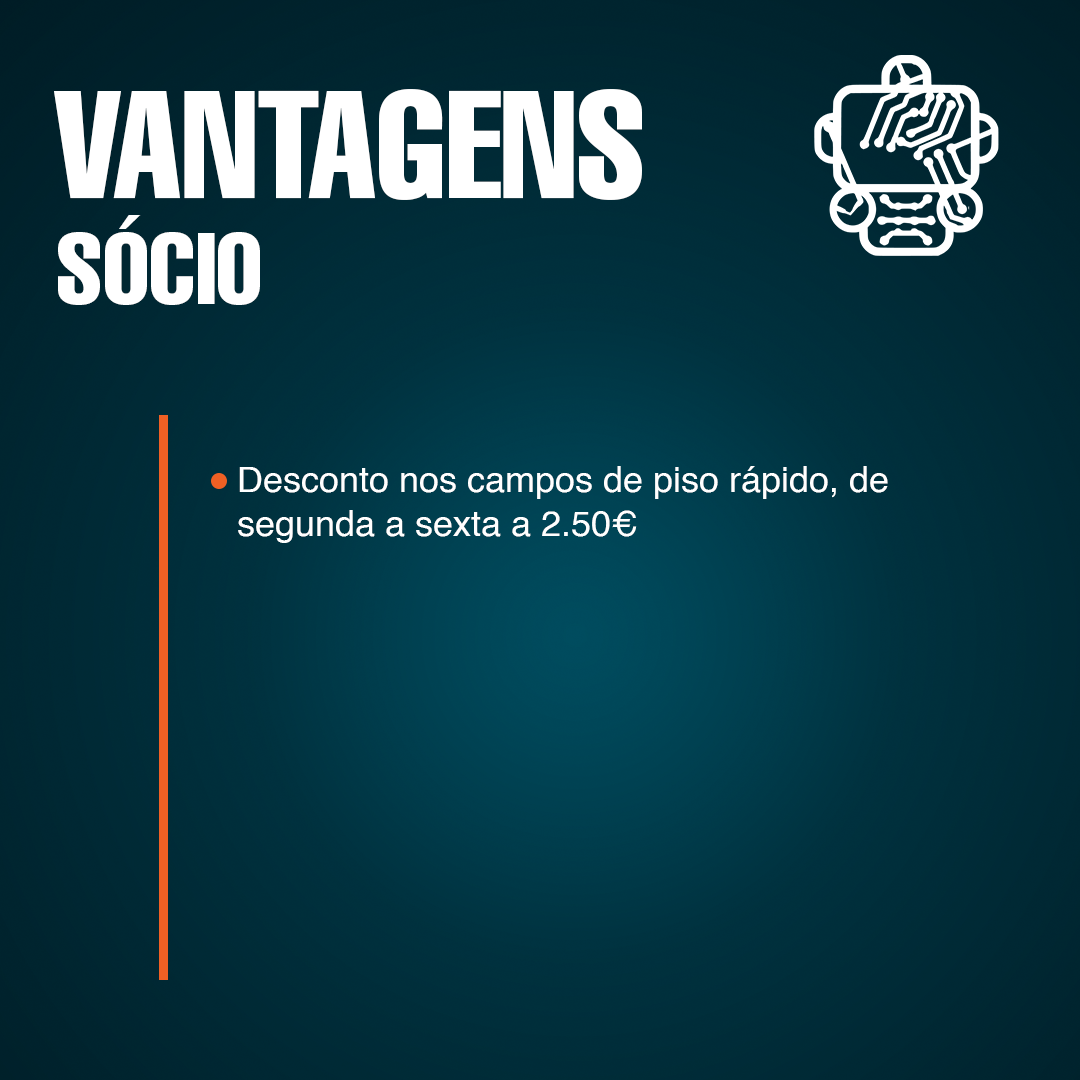
<style>
.page{position:relative;width:1080px;height:1080px}
.page>*{position:absolute;margin:0}
.t1{font:150px "Helvetica-Compressed";color:#ffffff}
.t2{font:100px "Helvetica-Compressed";color:#ffffff}
.t3{font:36px "Helvetica";color:#ffffff}
</style>
<div class="page">
<p class="t1" style="left:54px;top:89px;width:588px;height:111px">VANTAGENS</p>
<p class="t2" style="left:58px;top:215px;width:202px;height:90px">SÓCIO</p>
<p class="t3" style="left:238px;top:466px;width:650px;height:77px">Desconto nos campos de piso rápido, de segunda a sexta a 2.50€</p>
</div>
